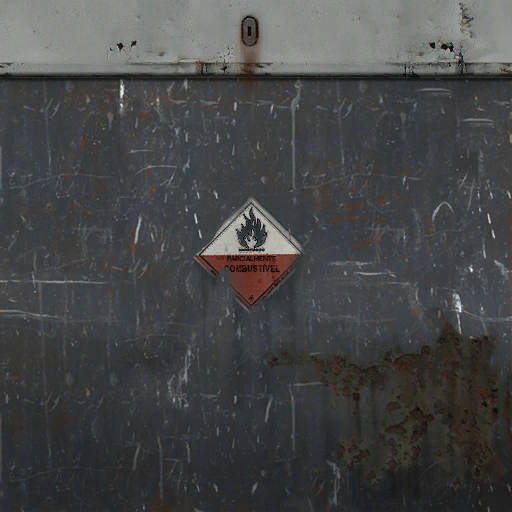
<style>
.page{position:relative;width:512px;height:512px}
.page>*{position:absolute;margin:0}
.t1{font:6.3px "RedHatDisplay-Regular";letter-spacing:0.01em;color:#100808;font-weight:bold}
.t2{font:8.5px "Helvetica-Narrow-Bold";letter-spacing:0.01em;color:#200f0d;font-weight:bold;scale:1.05 1}
</style>
<div class="page">
<p class="t1" style="left:227px;top:256px;width:49px;height:6px">PARCIALMENTE</p>
<p class="t2" style="left:224px;top:264px;width:56px;height:9px">COMBUSTÍVEL</p>
</div>
